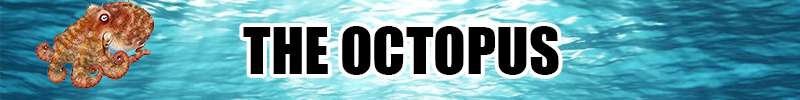
<style>
.page{position:relative;width:800px;height:100px}
.page>*{position:absolute;margin:0}
.t1{font:60px "Impact";color:#000000}
</style>
<div class="page">
<p class="t1" style="left:243px;top:26px;width:316px;height:49px">THE OCTOPUS</p>
</div>
